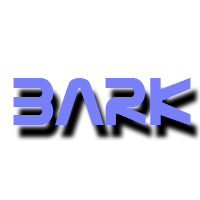
<style>
.page{position:relative;width:200px;height:200px;background:#ffffff}
.page>*{position:absolute;margin:0}
.t1{font:71px "Nasalization";color:#7780f8}
</style>
<div class="page">
<p class="t1" style="left:13px;top:77px;width:178px;height:49px">BARK</p>
</div>
